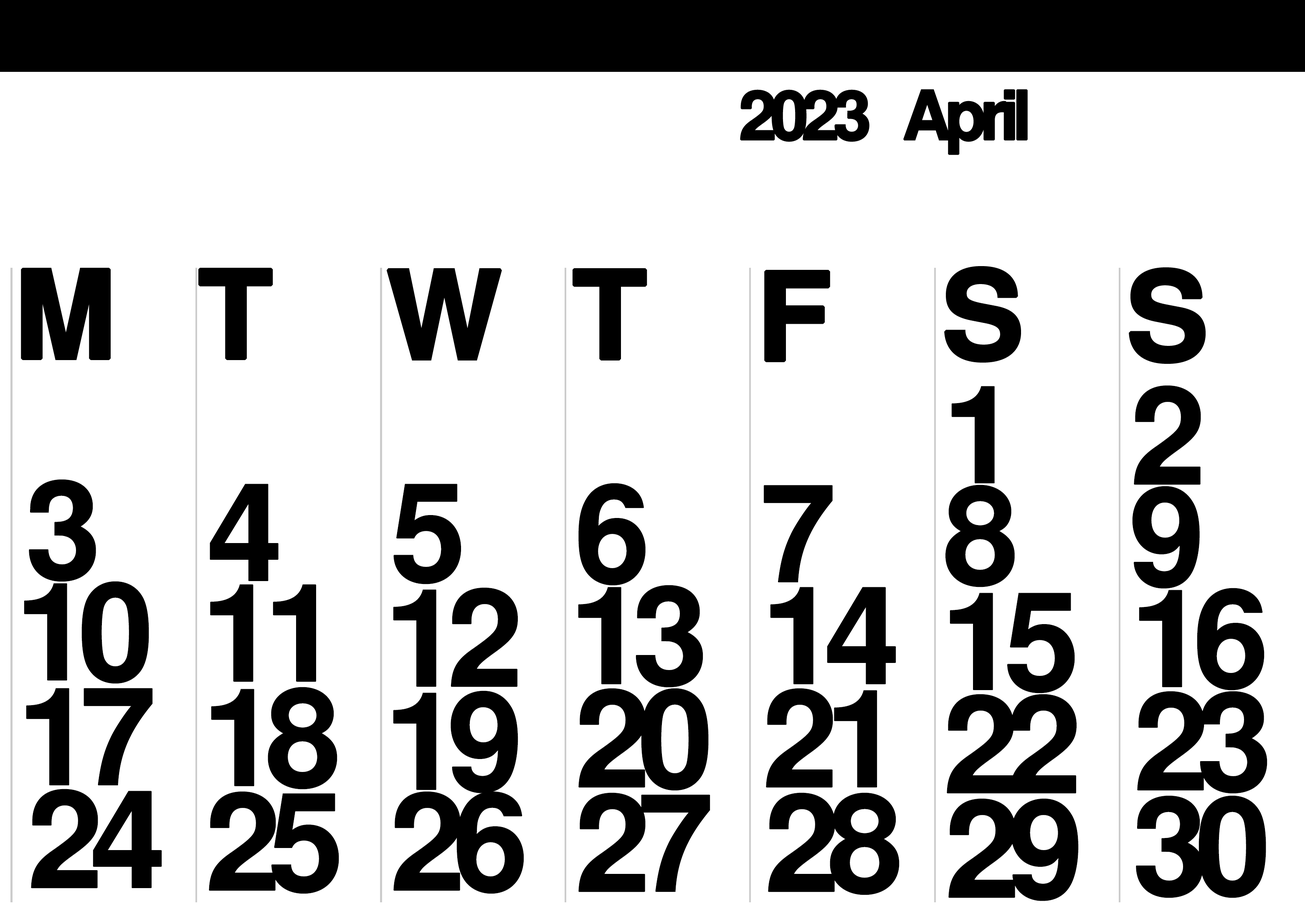
<style>
.page{position:relative;width:1305px;height:914px;background:#ffffff}
.page>*{position:absolute;margin:0}
.t1{font:67.9px "NimbusSanL-Bol";letter-spacing:-0.12em;color:#000000;font-weight:bold}
.t2{font:121.8px "NimbusSanL-Bol";color:#000000;font-weight:bold}
.t3{font:135.7px "NimbusSanL-Bol";letter-spacing:-0.12em;color:#000000;font-weight:bold}
</style>
<div class="page">
<p class="t1" style="left:740px;top:89px;width:288px;height:66px">2023   April</p>
<p class="t2" style="left:21px;top:268px;width:90px;height:92px">M</p>
<p class="t2" style="left:198px;top:268px;width:75px;height:92px">T</p>
<p class="t2" style="left:387px;top:268px;width:115px;height:92px">W</p>
<p class="t2" style="left:573px;top:268px;width:74px;height:92px">T</p>
<p class="t2" style="left:764px;top:270px;width:66px;height:92px">F</p>
<p class="t2" style="left:944px;top:266px;width:77px;height:96px">S</p>
<p class="t2" style="left:1129px;top:267px;width:77px;height:97px">S</p>
<p class="t3" style="left:951px;top:386px;width:44px;height:97px">1</p>
<p class="t3" style="left:1134px;top:385px;width:67px;height:100px">2</p>
<p class="t3" style="left:29px;top:479px;width:67px;height:103px">3</p>
<p class="t3" style="left:210px;top:484px;width:69px;height:97px">4</p>
<p class="t3" style="left:393px;top:484px;width:68px;height:100px">5</p>
<p class="t3" style="left:578px;top:483px;width:68px;height:102px">6</p>
<p class="t3" style="left:764px;top:485px;width:69px;height:97px">7</p>
<p class="t3" style="left:945px;top:484px;width:70px;height:103px">8</p>
<p class="t3" style="left:1132px;top:486px;width:68px;height:102px">9</p>
<p class="t3" style="left:24px;top:581px;width:125px;height:103px">10</p>
<p class="t3" style="left:210px;top:584px;width:106px;height:98px">11</p>
<p class="t3" style="left:393px;top:587px;width:125px;height:100px">12</p>
<p class="t3" style="left:578px;top:585px;width:125px;height:102px">13</p>
<p class="t3" style="left:770px;top:587px;width:126px;height:97px">14</p>
<p class="t3" style="left:950px;top:593px;width:125px;height:100px">15</p>
<p class="t3" style="left:1139px;top:588px;width:126px;height:102px">16</p>
<p class="t3" style="left:26px;top:688px;width:127px;height:97px">17</p>
<p class="t3" style="left:211px;top:687px;width:126px;height:102px">18</p>
<p class="t3" style="left:578px;top:688px;width:131px;height:103px">20</p>
<p class="t3" style="left:766px;top:688px;width:111px;height:100px">21</p>
<p class="t3" style="left:393px;top:690px;width:125px;height:103px">19</p>
<p class="t3" style="left:947px;top:694px;width:130px;height:99px">22</p>
<p class="t3" style="left:1137px;top:691px;width:130px;height:102px">23</p>
<p class="t3" style="left:31px;top:788px;width:131px;height:100px">24</p>
<p class="t3" style="left:209px;top:791px;width:130px;height:103px">25</p>
<p class="t3" style="left:393px;top:791px;width:131px;height:103px">26</p>
<p class="t3" style="left:578px;top:792px;width:132px;height:100px">27</p>
<p class="t3" style="left:768px;top:792px;width:132px;height:103px">28</p>
<p class="t3" style="left:1136px;top:795px;width:130px;height:103px">30</p>
<p class="t3" style="left:948px;top:798px;width:131px;height:103px">29</p>
</div>
